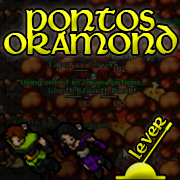
<style>
.page{position:relative;width:180px;height:180px}
.page>*{position:absolute;margin:0}
.t1{font:41.7px/23px "Martel"}
.t2{font:19.9px "Martel"}
</style>
<div class="page">
<p class="t1" style="left:4px;top:8px;width:173px;height:46px;text-align:center">pontos<br>oramond</p>
<p class="t2" style="left:128px;top:117px;width:38px;height:43px;rotate:-55deg">lever</p>
</div>
